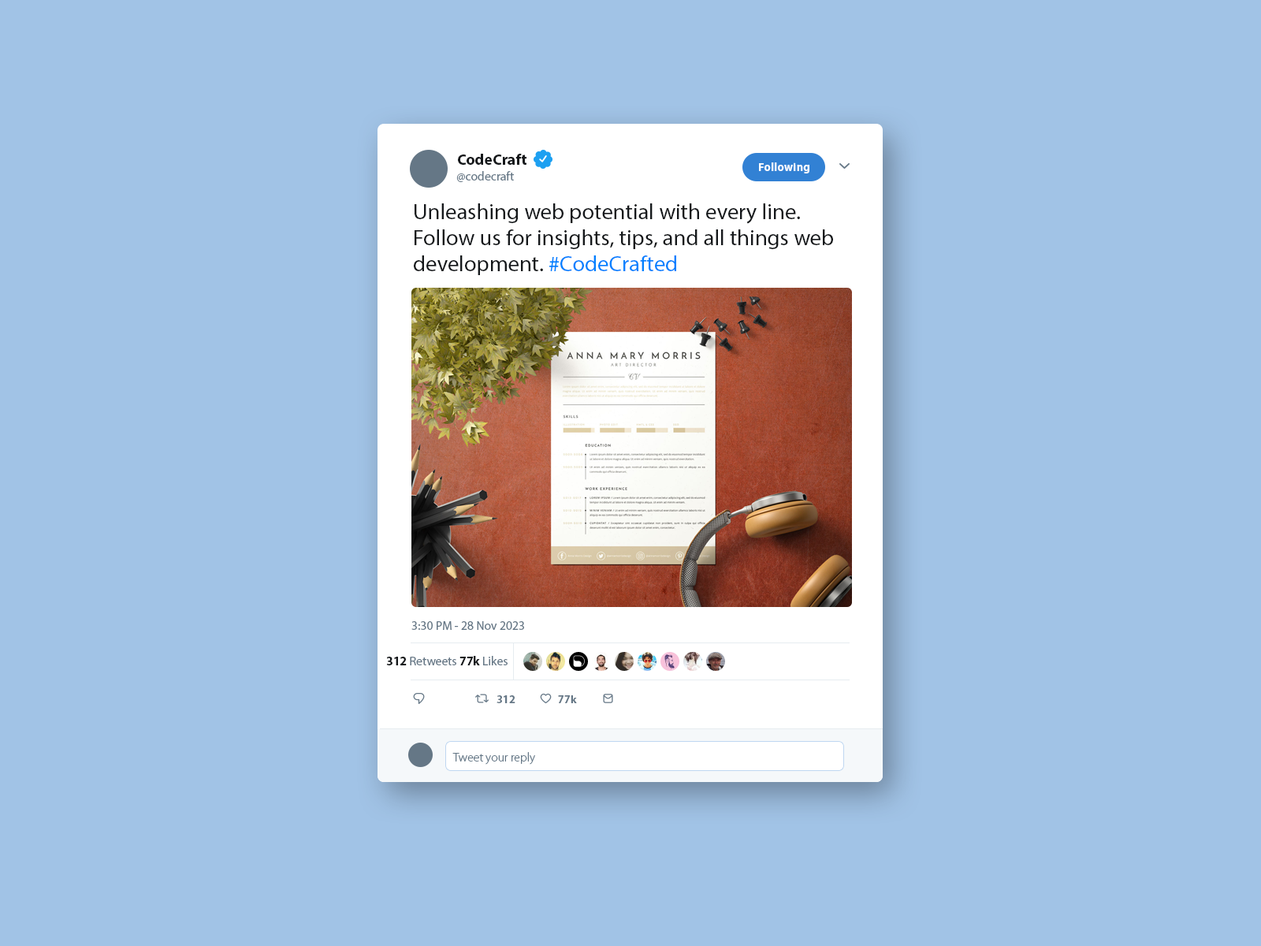
<style>
.page{position:relative;width:1261px;height:946px;background:#a1c3e6}
.page>*{position:absolute;margin:0}
.t1{font:15.2px "MyriadPro-Bold";color:#14171a}
.t2{font:12.3px "MyriadPro-Regular";color:#657786}
.t3{font:11.6px "MyriadPro-Bold";color:#ffffff}
.t4{font:21.7px "MyriadPro-Regular";color:#14171a;scale:1.03 1}
.t5{font:21.7px "MyriadPro-Regular";color:#0080ff;scale:1.03 1}
.t6{font:12.3px "MyriadPro-Bold";color:#14171a}
.t7{font:11.1px "MyriadPro-Bold";color:#657786}
.t8{font:12.3px "MyriadPro-Light";color:#657786}
</style>
<div class="page">
<p class="t1" style="left:458px;top:154px;width:68px;height:11px">CodeCraft</p>
<p class="t2" style="left:456px;top:171px;width:58px;height:11px">@codecraft</p>
<p class="t3" style="left:759px;top:162px;width:50px;height:11px">Following</p>
<p class="t4" style="left:414px;top:203px;width:419px;height:72px">Unleashing web potential with every line. <br>Follow us for insights, tips, and all things web <br>development. <span class="t5">#CodeCrafted</span></p>
<p class="t2" style="left:411px;top:621px;width:113px;height:9px">3:30 PM - 28 Nov 2023</p>
<p class="t2" style="left:386px;top:656px;width:122px;height:9px"><span class="t6">312</span> Retweets <span class="t6">77k </span>Likes</p>
<p class="t7" style="left:496px;top:695px;width:19px;height:8px">312</p>
<p class="t7" style="left:558px;top:695px;width:19px;height:8px">77k</p>
<p class="t8" style="left:452px;top:752px;width:83px;height:12px">Tweet your reply</p>
</div>
